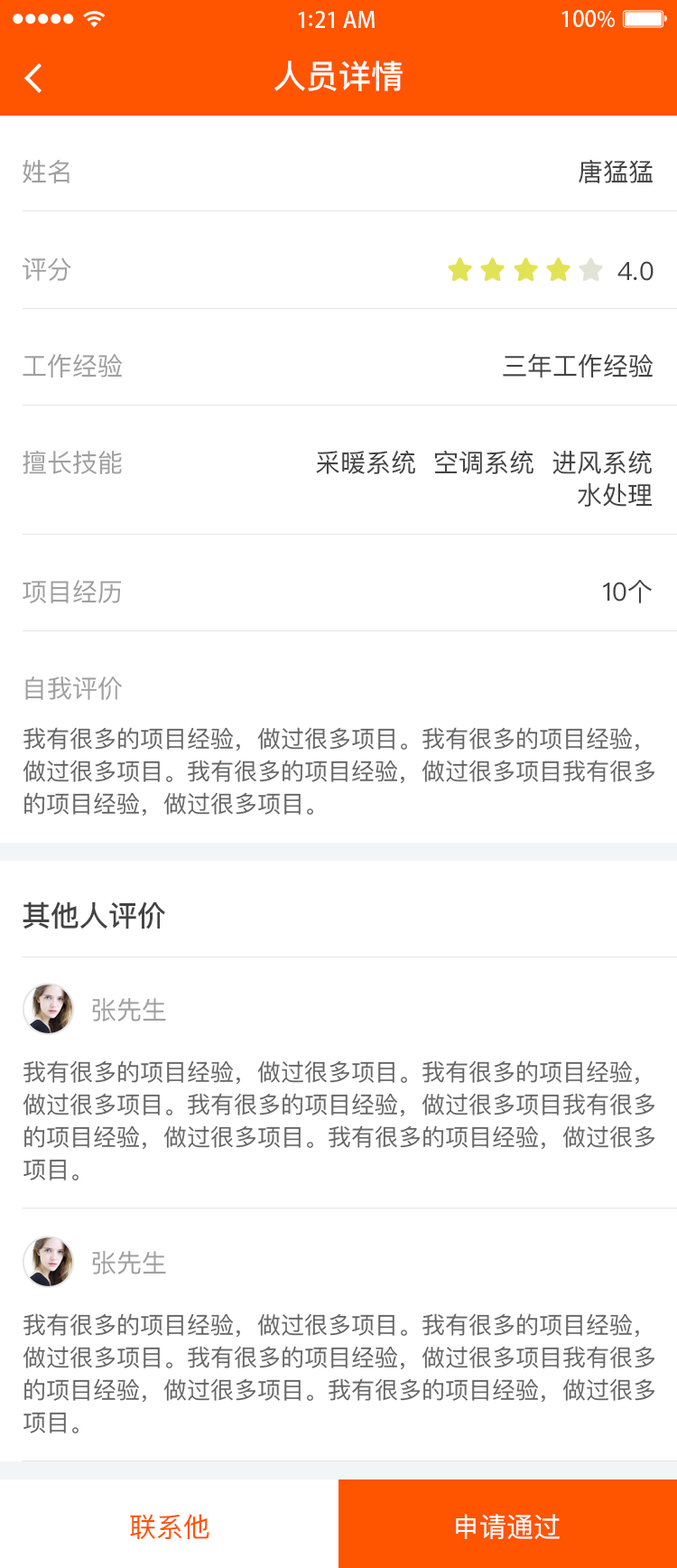
<style>
.page{position:relative;width:677px;height:1568px;background:#ffffff}
.page>*{position:absolute;margin:0}
.t1{font:32.5px "PingFangSC-Medium";color:#ffffff}
.t2{font:25.3px "PingFangSC-Regular";color:#a0a0a0}
.t3{font:25.3px "PingFangSC-Regular";color:#434343}
.t4{font:25.3px/36.1px "PingFangSC-Regular";color:#434343}
.t5{font:23.5px/36.1px "PingFangSC-Regular";color:#666666}
.t6{font:28.9px "PingFangSC-Medium";color:#434343}
.t7{font:27.1px "PingFangSC-Regular";color:#ff5400}
.t8{font:27.1px "PingFangSC-Regular";color:#ffffff}
</style>
<div class="page">
<p class="t1" style="left:275px;top:61px;width:128px;height:30px">人员详情</p>
<p class="t2" style="left:23px;top:160px;width:47px;height:23px">姓名</p>
<p class="t3" style="left:579px;top:160px;width:74px;height:23px">唐猛猛</p>
<p class="t2" style="left:23px;top:257px;width:48px;height:24px">评分</p>
<p class="t3" style="left:618px;top:261px;width:36px;height:20px">4.0</p>
<p class="t3" style="left:503px;top:353px;width:150px;height:25px">三年工作经验</p>
<p class="t2" style="left:23px;top:354px;width:99px;height:24px">工作经验</p>
<p class="t2" style="left:23px;top:450px;width:99px;height:24px">擅长技能</p>
<p class="t4" style="left:316px;top:450px;width:336px;height:57px;text-align:right">采暖系统  空调系统  进风系统<br>水处理</p>
<p class="t2" style="left:23px;top:580px;width:99px;height:23px">项目经历</p>
<p class="t3" style="left:603px;top:580px;width:49px;height:23px">10个</p>
<p class="t2" style="left:25px;top:677px;width:97px;height:23px">自我评价</p>
<p class="t5" style="left:23px;top:727px;width:632px;height:90px">我有很多的项目经验，做过很多项目。我有很多的项目经验，<br>做过很多项目。我有很多的项目经验，做过很多项目我有很多<br>的项目经验，做过很多项目。</p>
<p class="t6" style="left:23px;top:901px;width:142px;height:28px">其他人评价</p>
<p class="t2" style="left:92px;top:998px;width:74px;height:24px">张先生</p>
<p class="t5" style="left:23px;top:1060px;width:632px;height:121px">我有很多的项目经验，做过很多项目。我有很多的项目经验，<br>做过很多项目。我有很多的项目经验，做过很多项目我有很多<br>的项目经验，做过很多项目。我有很多的项目经验，做过很多<br>项目。</p>
<p class="t2" style="left:92px;top:1251px;width:74px;height:23px">张先生</p>
<p class="t5" style="left:23px;top:1313px;width:632px;height:120px">我有很多的项目经验，做过很多项目。我有很多的项目经验，<br>做过很多项目。我有很多的项目经验，做过很多项目我有很多<br>的项目经验，做过很多项目。我有很多的项目经验，做过很多<br>项目。</p>
<p class="t7" style="left:130px;top:1514px;width:80px;height:26px">联系他</p>
<p class="t8" style="left:456px;top:1514px;width:104px;height:26px">申请通过</p>
</div>
